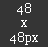
<style>
.page{position:relative;width:48px;height:47px;background:#353535}
.page>*{position:absolute;margin:0}
.t1{font:12px/14.4px "Georgia";color:#ffffff}
</style>
<div class="page">
<p class="t1" style="left:10px;top:3px;width:28px;height:42px;text-align:center">48<br>x<br>48px</p>
</div>
